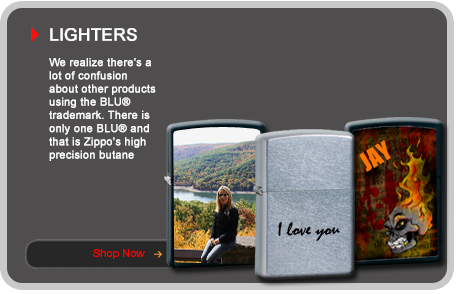
<style>
.page{position:relative;width:456px;height:294px;background:#4f4d4e}
.page>*{position:absolute;margin:0}
.t1{font:17px "ArialMT";color:#ffffff;text-transform:uppercase;font-weight:bold}
.t2{font:11px "ArialMT";color:#ffffff;font-weight:bold}
</style>
<div class="page">
<p class="t1" style="left:50px;top:28px;width:87px;height:13px">LIGHTERS</p>
<p class="t2" style="left:49px;top:58px;width:107px;height:103px">We realize there's a lot of confusion about other products<br>using the BLU® trademark. There is only one BLU® and<br>that is Zippo's high precision butane lighter.</p>
</div>
